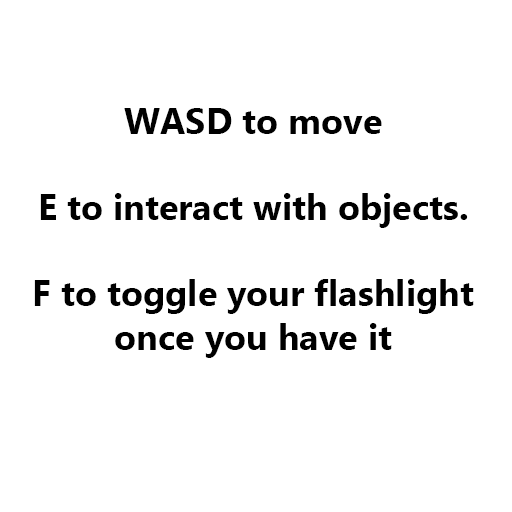
<style>
.page{position:relative;width:512px;height:512px;background:#ffffff}
.page>*{position:absolute;margin:0}
.t1{font:36px "MicrosoftTaiLe-Bold";color:#000000}
</style>
<div class="page">
<p class="t1" style="left:34px;top:108px;width:440px;height:250px;text-align:center">WASD to move<br><br>E to interact with objects.<br><br>F to toggle your flashlight <br>once you have it</p>
</div>
